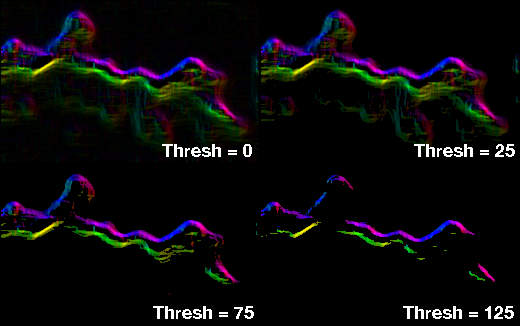
<style>
.page{position:relative;width:520px;height:326px;background:#000000}
.page>*{position:absolute;margin:0}
.t1{font:18px "HelveticaNeue-Bold";color:#ffffff}
</style>
<div class="page">
<p class="t1" style="left:162px;top:144px;width:90px;height:13px">Thresh = 0</p>
<p class="t1" style="left:414px;top:144px;width:101px;height:13px">Thresh = 25</p>
<p class="t1" style="left:153px;top:306px;width:101px;height:13px">Thresh = 75</p>
<p class="t1" style="left:403px;top:306px;width:111px;height:13px">Thresh = 125</p>
</div>
